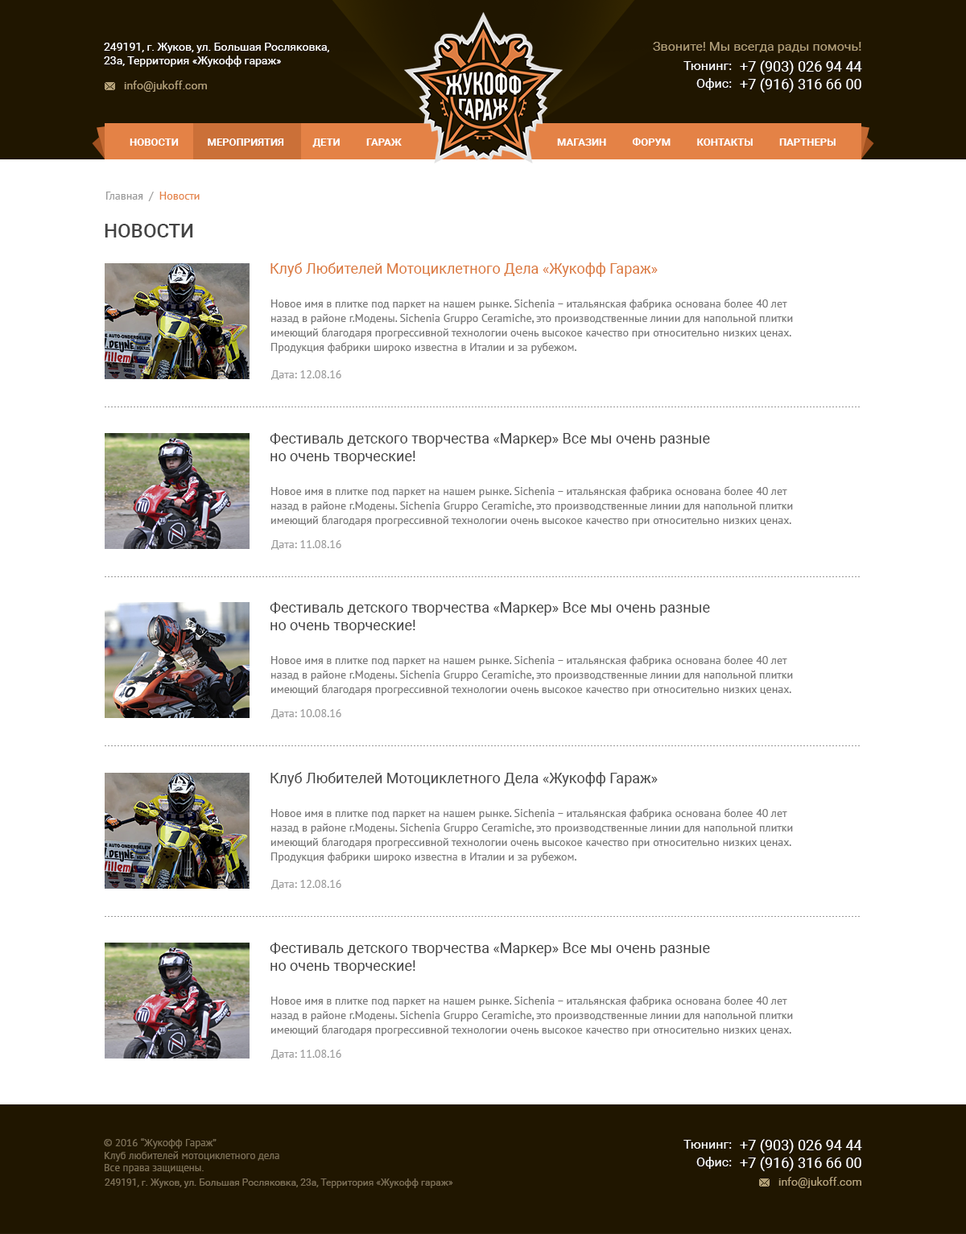
<style>
.page{position:relative;width:966px;height:1234px;background:#ffffff}
.page>*{position:absolute;margin:0}
.t1{font:12.9px "Roboto-Regular";color:#b3a078}
.t2{font:11.3px "Roboto-Regular";color:#ffffff}
.t3{font:12.9px "Roboto-Regular";color:#ffffff}
.t4{font:14.5px "Roboto-Regular";color:#ffffff;text-transform:uppercase}
.t5{font:11.3px "Roboto-Regular";color:#b3a078}
.t6{font:10.5px "Roboto-Bold";color:#ffffff;text-transform:uppercase}
.t7{font:11.3px "PTSans-Regular";color:#999999}
.t8{font:11.3px "PTSans-Regular";color:#e48246}
.t9{font:19.3px "Roboto-Medium";color:#444444;text-transform:uppercase}
.t10{font:14.5px "Roboto-Regular";color:#db783b}
.t11{font:11.3px/14.5px "PTSans-Regular";color:#777777}
.t12{font:14.5px "Roboto-Regular";color:#444444}
.t13{font:10.5px "PTSans-Regular";color:#7d7055}
.t14{font:9.7px "Roboto-Regular";color:#7d7055}
</style>
<div class="page">
<p class="t1" style="left:653px;top:42px;width:208px;height:11px">Звоните! Мы всегда рады помочь!</p>
<p class="t2" style="left:104px;top:43px;width:225px;height:24px">249191, г. Жуков, ул. Большая Росляковка,<br>23а, Территория «Жукофф гараж»</p>
<p class="t3" style="left:684px;top:61px;width:48px;height:9px">Тюнинг:</p>
<p class="t4" style="left:740px;top:60px;width:122px;height:33px">+7 (903) 026 94 44<br>+7 (916) 316 66 00</p>
<p class="t5" style="left:124px;top:81px;width:83px;height:11px">info@jukoff.com</p>
<p class="t3" style="left:696px;top:78px;width:36px;height:12px">Офис:</p>
<p class="t6" style="left:557px;top:138px;width:279px;height:8px">Магазин          Форум          Контакты          Партнеры</p>
<p class="t6" style="left:130px;top:138px;width:272px;height:9px">Новости           Мероприятия           дети          Гараж</p>
<p class="t7" style="left:106px;top:192px;width:94px;height:9px">Главная  /  <span class="t8">Новости</span></p>
<p class="t9" style="left:105px;top:224px;width:88px;height:14px">новости</p>
<p class="t10" style="left:271px;top:262px;width:387px;height:15px">Клуб Любителей Мотоциклетного Дела «Жукофф Гараж»</p>
<p class="t11" style="left:271px;top:299px;width:522px;height:54px">Новое имя в плитке под паркет на нашем рынке. Sichenia – итальянская фабрика основана более 40 лет назад в районе г.Модены. Sichenia Gruppo Ceramiche, это производственные линии для напольной плитки имеющий благодаря прогрессивной технологии очень высокое качество при относительно низких ценах. Продукция фабрики широко известна в Италии и за рубежом.</p>
<p class="t7" style="left:271px;top:370px;width:70px;height:10px">Дата: 12.08.16</p>
<p class="t12" style="left:270px;top:433px;width:440px;height:32px">Фестиваль детского творчества «Маркер» Все мы очень разные<br>но очень творческие!</p>
<p class="t11" style="left:271px;top:486px;width:522px;height:41px">Новое имя в плитке под паркет на нашем рынке. Sichenia – итальянская фабрика основана более 40 лет назад в районе г.Модены. Sichenia Gruppo Ceramiche, это производственные линии для напольной плитки имеющий благодаря прогрессивной технологии очень высокое качество при относительно низких ценах.</p>
<p class="t7" style="left:271px;top:540px;width:70px;height:10px">Дата: 11.08.16</p>
<p class="t12" style="left:270px;top:602px;width:440px;height:32px">Фестиваль детского творчества «Маркер» Все мы очень разные<br>но очень творческие!</p>
<p class="t11" style="left:271px;top:655px;width:522px;height:41px">Новое имя в плитке под паркет на нашем рынке. Sichenia – итальянская фабрика основана более 40 лет назад в районе г.Модены. Sichenia Gruppo Ceramiche, это производственные линии для напольной плитки имеющий благодаря прогрессивной технологии очень высокое качество при относительно низких ценах.</p>
<p class="t7" style="left:271px;top:709px;width:70px;height:10px">Дата: 10.08.16</p>
<p class="t12" style="left:271px;top:772px;width:387px;height:15px">Клуб Любителей Мотоциклетного Дела «Жукофф Гараж»</p>
<p class="t11" style="left:271px;top:808px;width:522px;height:55px">Новое имя в плитке под паркет на нашем рынке. Sichenia – итальянская фабрика основана более 40 лет назад в районе г.Модены. Sichenia Gruppo Ceramiche, это производственные линии для напольной плитки имеющий благодаря прогрессивной технологии очень высокое качество при относительно низких ценах. Продукция фабрики широко известна в Италии и за рубежом.</p>
<p class="t7" style="left:271px;top:880px;width:70px;height:10px">Дата: 12.08.16</p>
<p class="t12" style="left:270px;top:943px;width:440px;height:31px">Фестиваль детского творчества «Маркер» Все мы очень разные<br>но очень творческие!</p>
<p class="t11" style="left:271px;top:996px;width:522px;height:40px">Новое имя в плитке под паркет на нашем рынке. Sichenia – итальянская фабрика основана более 40 лет назад в районе г.Модены. Sichenia Gruppo Ceramiche, это производственные линии для напольной плитки имеющий благодаря прогрессивной технологии очень высокое качество при относительно низких ценах.</p>
<p class="t7" style="left:271px;top:1050px;width:70px;height:10px">Дата: 11.08.16</p>
<p class="t13" style="left:104px;top:1138px;width:175px;height:36px">© 2016 “Жукофф Гараж”<br>Клуб любителей мотоциклетного дела<br>Все права защищены.</p>
<p class="t3" style="left:684px;top:1140px;width:48px;height:9px">Тюнинг:</p>
<p class="t4" style="left:740px;top:1139px;width:122px;height:32px">+7 (903) 026 94 44<br>+7 (916) 316 66 00</p>
<p class="t3" style="left:696px;top:1157px;width:36px;height:12px">Офис:</p>
<p class="t14" style="left:105px;top:1179px;width:348px;height:9px">249191, г. Жуков, ул. Большая Росляковка, 23а, Территория «Жукофф гараж»</p>
<p class="t5" style="left:779px;top:1177px;width:82px;height:11px">info@jukoff.com</p>
</div>
